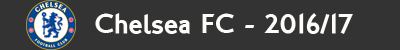
<style>
.page{position:relative;width:400px;height:50px;background:#333333}
.page>*{position:absolute;margin:0}
.t1{font:27px "LondonTwo";color:#fdfcf8}
</style>
<div class="page">
<p class="t1" style="left:95px;top:13px;width:258px;height:21px">Chelsea FC - 2016/17</p>
</div>
